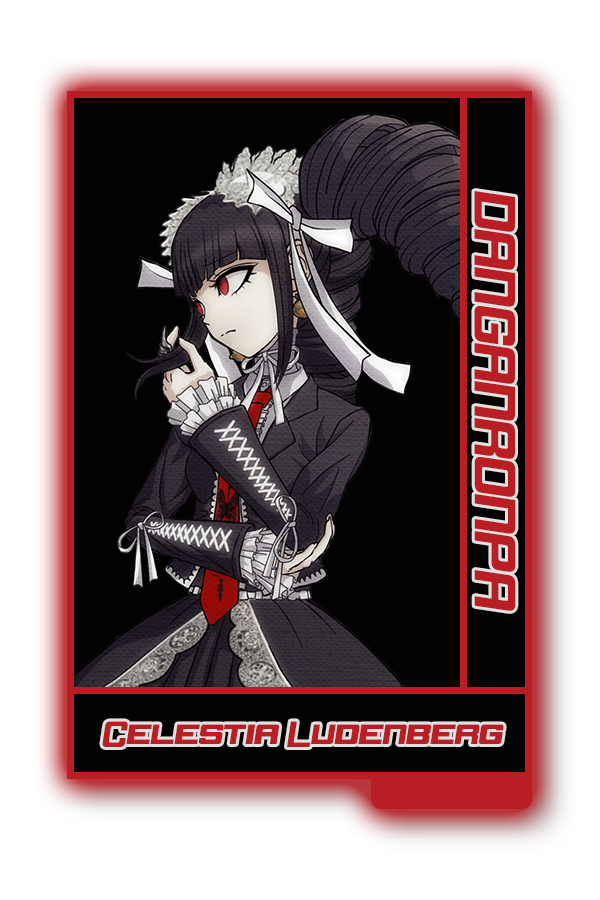
<style>
.page{position:relative;width:600px;height:900px;background:#020202}
.page>*{position:absolute;margin:0}
.t1{font:48.8px "DorBlue";color:#bb2c2e}
.t2{font:30.8px "DorBlue";color:#bb2c2e}
</style>
<div class="page">
<p class="t1" style="left:474px;top:191px;width:42px;height:420px;rotate:90deg">DANGANRONPA</p>
<p class="t2" style="left:102px;top:721px;width:402px;height:26px">Celestia Ludenberg</p>
</div>
